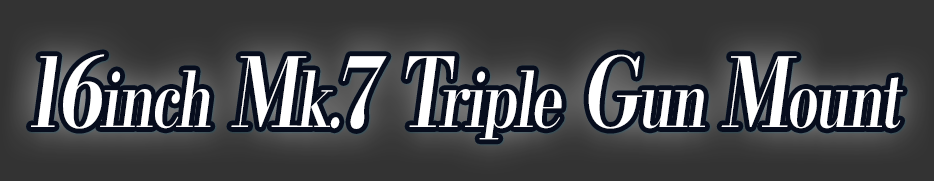
<style>
.page{position:relative;width:934px;height:181px;background:#333333}
.page>*{position:absolute;margin:0}
.t1{font:76.8px "KochoStd-Heavy";letter-spacing:-0.04em;color:#ffffff;font-style:italic;scale:0.75 1}
.t2{font:96px "KochoStd-Heavy";letter-spacing:-0.04em;color:#ffffff;font-style:italic;scale:0.75 1}
</style>
<div class="page">
<p class="t1" style="left:31px;top:54px;width:872px;height:86px"><span class="t2">16</span>inch<span class="t2"> M</span>k.<span class="t2">7 T</span>riple<span class="t2"> G</span>un <span class="t2">M</span>ount</p>
</div>
